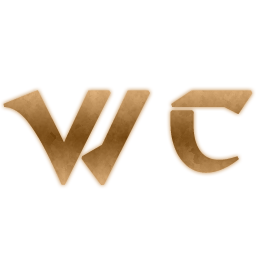
<style>
.page{position:relative;width:256px;height:256px;background:#ffffff}
.page>*{position:absolute;margin:0}
.t1{font:112px "StarcraftNormal";font-weight:bold}
</style>
<div class="page">
<p class="t1" style="left:3px;top:90px;width:250px;height:95px">WC</p>
</div>
